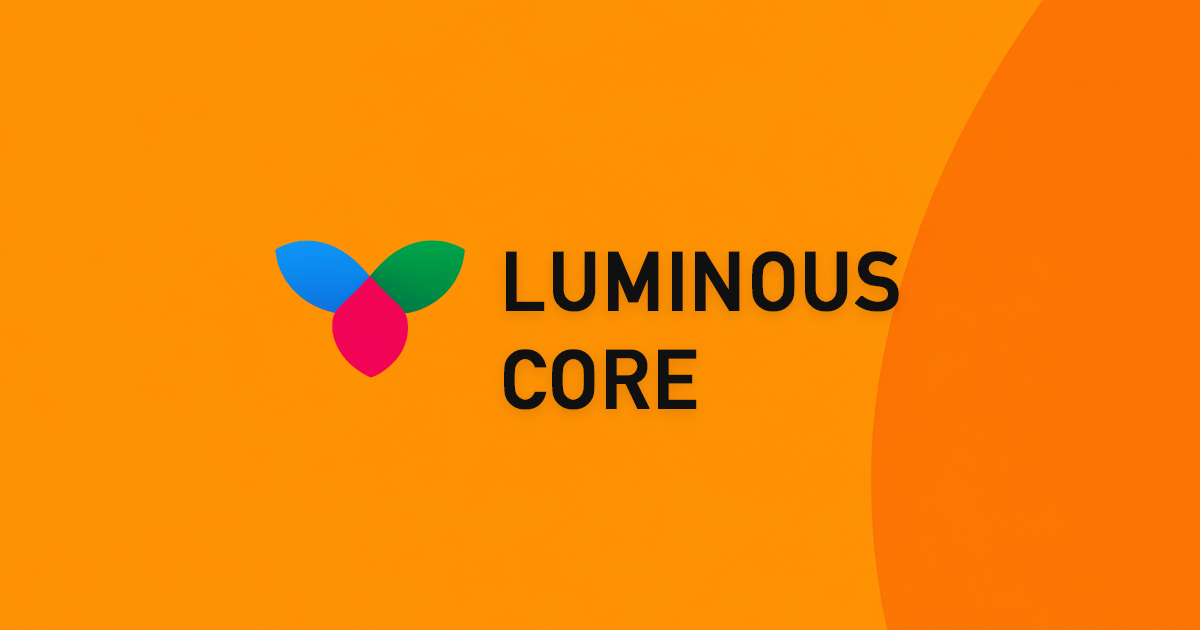
<style>
.page{position:relative;width:1200px;height:630px}
.page>*{position:absolute;margin:0}
.t1{font:82px "DINAlternate-Bold";color:#101010;font-weight:bold}
</style>
<div class="page">
<p class="t1" style="left:506px;top:251px;width:393px;height:61px">LUMINOUS</p>
<p class="t1" style="left:504px;top:349px;width:193px;height:61px">CORE</p>
</div>
